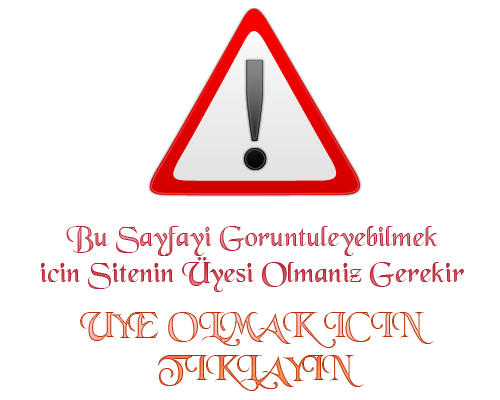
<style>
.page{position:relative;width:500px;height:400px;background:#ffffff}
.page>*{position:absolute;margin:0}
.t1{font:30px "Black-Regular"}
.t2{font:36px "Black-Regular"}
</style>
<div class="page">
<p class="t1" style="left:39px;top:226px;width:425px;height:66px;text-align:center">Bu Sayfayi Goruntuleyebilmek<br>icin Sitenin Üyesi Olmaniz Gerekir</p>
<p class="t2" style="left:80px;top:312px;width:354px;height:79px;text-align:center">UYE OLMAK ICIN <br>TIKLAYIN</p>
</div>
